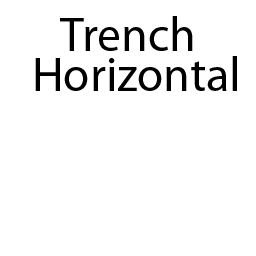
<style>
.page{position:relative;width:256px;height:256px;background:#ffffff}
.page>*{position:absolute;margin:0}
.t1{font:48px "MyriadPro-Regular";color:#000000}
</style>
<div class="page">
<p class="t1" style="left:60px;top:16px;width:133px;height:35px">Trench</p>
<p class="t1" style="left:35px;top:56px;width:202px;height:35px">Horizontal</p>
</div>
